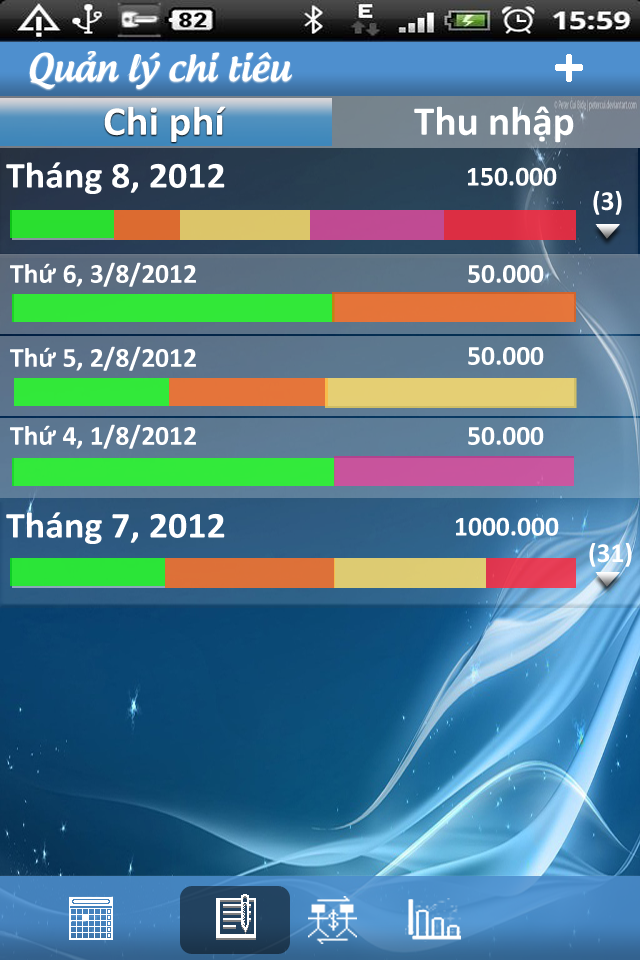
<style>
.page{position:relative;width:640px;height:960px}
.page>*{position:absolute;margin:0}
.t1{font:36.7px "UTM-Androgyne";color:#ffffff}
.t2{font:41.3px "Calibri-Bold";color:#ffffff;scale:1.03 1}
.t3{font:41.2px "Calibri-Bold";color:#ffffff}
.t4{font:36.7px "Calibri-Bold";color:#ffffff;scale:1.04 1}
.t5{font:27.5px "Calibri-Bold";color:#ffffff}
</style>
<div class="page">
<p class="t1" style="left:29px;top:51px;width:263px;height:38px">Quản lý chi tiêu</p>
<p class="t2" style="left:104px;top:106px;width:122px;height:36px">Chi phí</p>
<p class="t3" style="left:414px;top:106px;width:160px;height:37px">Thu nhập</p>
<p class="t4" style="left:6px;top:162px;width:219px;height:32px">Tháng 8, 2012</p>
<p class="t5" style="left:468px;top:167px;width:89px;height:19px">150.000</p>
<p class="t5" style="left:593px;top:191px;width:29px;height:24px">(3)</p>
<p class="t5" style="left:10px;top:262px;width:186px;height:25px">Thứ 6, 3/8/2012</p>
<p class="t5" style="left:468px;top:265px;width:76px;height:18px">50.000</p>
<p class="t5" style="left:10px;top:346px;width:186px;height:25px">Thứ 5, 2/8/2012</p>
<p class="t5" style="left:468px;top:347px;width:76px;height:18px">50.000</p>
<p class="t5" style="left:10px;top:424px;width:186px;height:25px">Thứ 4, 1/8/2012</p>
<p class="t5" style="left:468px;top:427px;width:76px;height:18px">50.000</p>
<p class="t4" style="left:6px;top:512px;width:219px;height:32px">Tháng 7, 2012</p>
<p class="t5" style="left:456px;top:517px;width:103px;height:19px">1000.000</p>
<p class="t5" style="left:589px;top:543px;width:43px;height:24px">(31)</p>
</div>
